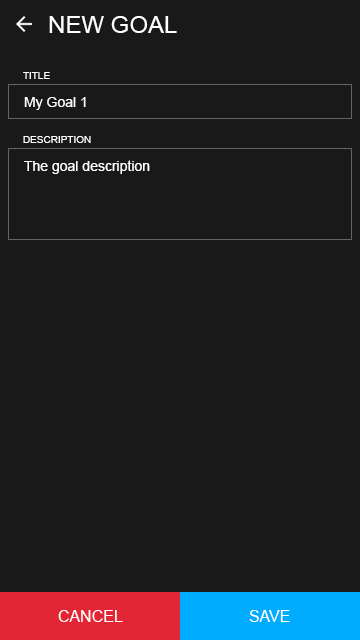
<style>
.page{position:relative;width:360px;height:640px;background:#191919}
.page>*{position:absolute;margin:0}
.t1{font:24px "ArialMT";color:#ffffff}
.t2{font:10px "ArialMT";color:#ffffff}
.t3{font:14px "ArialMT";color:#ffffff}
.t4{font:16px "ArialMT";color:#ffffff}
</style>
<div class="page">
<p class="t1" style="left:49px;top:16px;width:128px;height:17px">NEW GOAL</p>
<p class="t2" style="left:23px;top:72px;width:27px;height:7px">TITLE</p>
<p class="t3" style="left:24px;top:97px;width:62px;height:13px">My Goal 1</p>
<p class="t2" style="left:23px;top:136px;width:68px;height:7px">DESCRIPTION</p>
<p class="t3" style="left:24px;top:160px;width:126px;height:14px">The goal description</p>
<p class="t4" style="left:58px;top:610px;width:65px;height:12px">CANCEL</p>
<p class="t4" style="left:249px;top:610px;width:41px;height:12px">SAVE</p>
</div>
